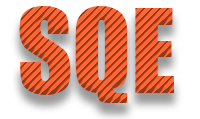
<style>
.page{position:relative;width:200px;height:119px;background:#ffffff}
.page>*{position:absolute;margin:0}
.t1{font:108.2px "Impact"}
</style>
<div class="page">
<p class="t1" style="left:19px;top:6px;width:155px;height:97px">SQE</p>
</div>
